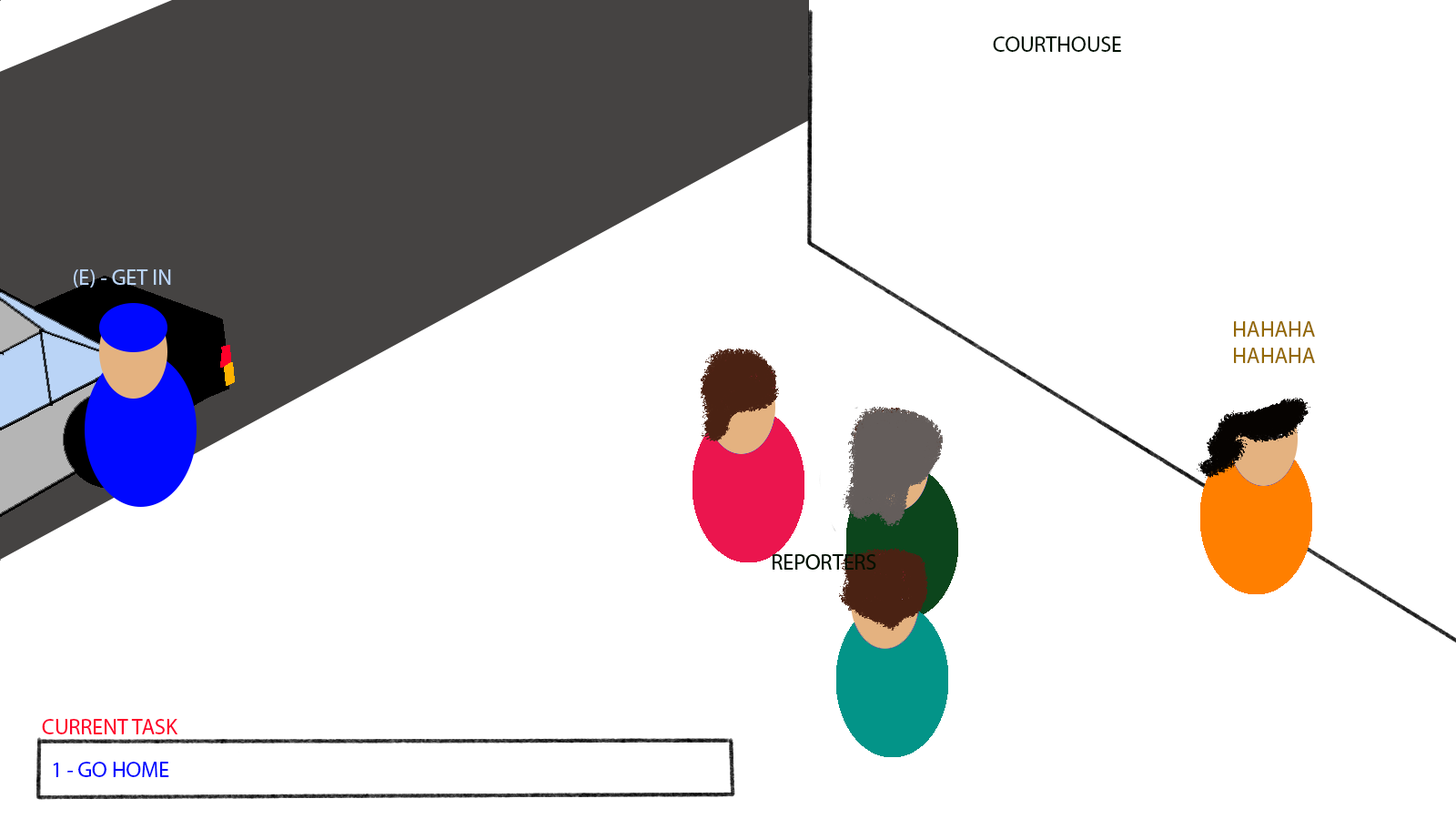
<style>
.page{position:relative;width:1456px;height:819px;background:#ffffff}
.page>*{position:absolute;margin:0}
.t1{font:21.8px "MyriadPro-Regular";color:#011102}
.t2{font:21.8px "MyriadPro-Regular";color:#bad4f6}
.t3{font:21.8px "MyriadPro-Regular";color:#946903}
.t4{font:21.8px "MyriadPro-Regular";color:#ff002a}
.t5{font:21.8px "MyriadPro-Regular";color:#0008ff}
</style>
<div class="page">
<p class="t1" style="left:993px;top:36px;width:128px;height:16px">COURTHOUSE</p>
<p class="t2" style="left:74px;top:269px;width:97px;height:19px">(E) - GET IN</p>
<p class="t3" style="left:1234px;top:321px;width:81px;height:42px;text-align:center">HAHAHA<br>HAHAHA</p>
<p class="t4" style="left:42px;top:719px;width:136px;height:15px">CURRENT TASK</p>
<p class="t5" style="left:53px;top:762px;width:116px;height:15px">1 - GO HOME</p>
</div>
